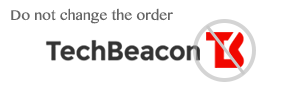
<style>
.page{position:relative;width:300px;height:100px;background:#ffffff}
.page>*{position:absolute;margin:0}
.t1{font:14px "LaoMN";color:#666666}
</style>
<div class="page">
<p class="t1" style="left:11px;top:8px;width:162px;height:16px">Do not change the order</p>
</div>
